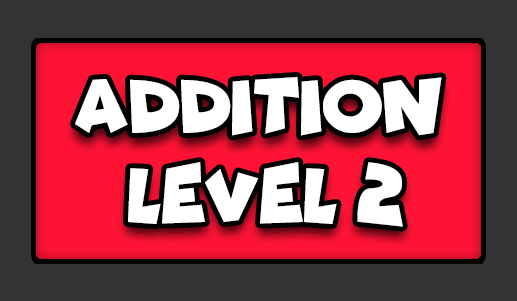
<style>
.page{position:relative;width:517px;height:301px;background:#333333}
.page>*{position:absolute;margin:0}
.t1{font:77.7px "Funhouse";color:#ffffff;scale:0.95 1}
</style>
<div class="page">
<p class="t1" style="left:75px;top:77px;width:367px;height:59px">ADDITION</p>
<p class="t1" style="left:128px;top:162px;width:275px;height:65px">LEVEL 2</p>
</div>
